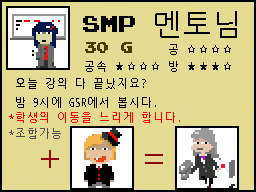
<style>
.page{position:relative;width:256px;height:192px;background:#e4db92}
.page>*{position:absolute;margin:0}
.t1{font:18px "PressStart2P";color:#000000}
.t2{font:30px "NanumGothicCoding";color:#000000}
.t3{font:12px "PressStart2P";color:#4b3800}
.t4{font:11px "NanumGothicCoding";color:#000000}
.t5{font:11px "NanumGothicCoding";color:#ff0000}
.t6{font:11px "NanumGothicCoding";color:#4f4f4f}
.t7{font:36px "NanumGothicCoding";color:#900707}
</style>
<div class="page">
<p class="t1" style="left:83px;top:11px;width:154px;height:27px">SMP<span class="t2"> 멘토님</span></p>
<p class="t3" style="left:85px;top:42px;width:47px;height:11px">30 G</p>
<p class="t4" style="left:169px;top:44px;width:62px;height:11px">공 ☆☆☆☆</p>
<p class="t4" style="left:85px;top:61px;width:146px;height:11px">공속 ★☆☆☆ 방 ★★★☆</p>
<p class="t4" style="left:16px;top:78px;width:140px;height:30px">오늘 강의 다 끝났지요?<br>밤 9시에 GSR에서 봅시다.</p>
<p class="t5" style="left:9px;top:112px;width:171px;height:11px">*학생의 이동을 느리게 합니다.</p>
<p class="t6" style="left:9px;top:128px;width:52px;height:11px">*조합가능</p>
<p class="t7" style="left:41px;top:150px;width:18px;height:18px">+</p>
<p class="t7" style="left:145px;top:154px;width:18px;height:10px">=</p>
</div>
